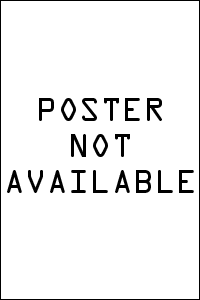
<style>
.page{position:relative;width:200px;height:300px;background:#ffffff}
.page>*{position:absolute;margin:0}
.t1{font:30px "OCRAStd";color:#000000}
</style>
<div class="page">
<p class="t1" style="left:7px;top:98px;width:187px;height:95px;text-align:center">POSTER<br>NOT<br>AVAILABLE</p>
</div>
